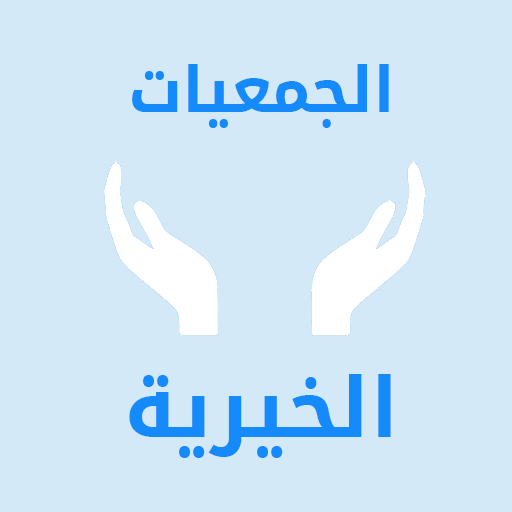
<style>
.page{position:relative;width:512px;height:512px;background:#d3e9f8}
.page>*{position:absolute;margin:0}
.t1{font:62.5px "DroidArabicKufi-Bold";color:#158bfb}
.t2{font:83.3px "DroidArabicKufi-Bold";color:#158bfb}
.t3{font:62.5px "DroidArabicKufi-Bold";color:#000000}
</style>
<div class="page">
<p class="t1" style="left:132px;top:64px;width:257px;height:64px">الجمعيات</p>
<p class="t2" style="left:129px;top:374px;width:262px;height:84px"><span class="t3"><br></span>الخيرية</p>
</div>
